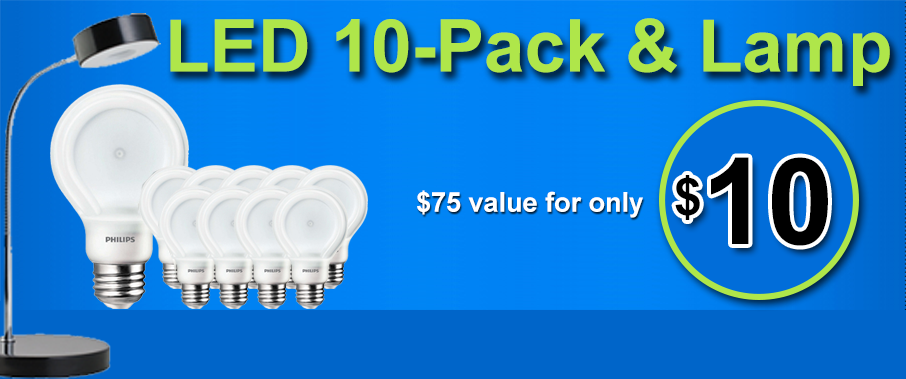
<style>
.page{position:relative;width:906px;height:379px}
.page>*{position:absolute;margin:0}
.t1{font:72.9px "Arial-BoldMT";letter-spacing:-0.005em;color:#afe64a}
.t2{font:119.8px "Arial-BoldMT";letter-spacing:-0.005em;color:#000000}
.t3{font:87.8px "Arial-BoldMT";letter-spacing:-0.005em;color:#000000}
.t4{font:27.5px "Arial-BoldMT";letter-spacing:-0.005em;color:#ffffff}
</style>
<div class="page">
<p class="t1" style="left:170px;top:18px;width:720px;height:68px">LED 10-Pack &amp; Lamp</p>
<p class="t2" style="left:675px;top:157px;width:153px;height:89px"><span class="t3">$</span>10</p>
<p class="t4" style="left:417px;top:190px;width:226px;height:28px">$75 value for only</p>
</div>
